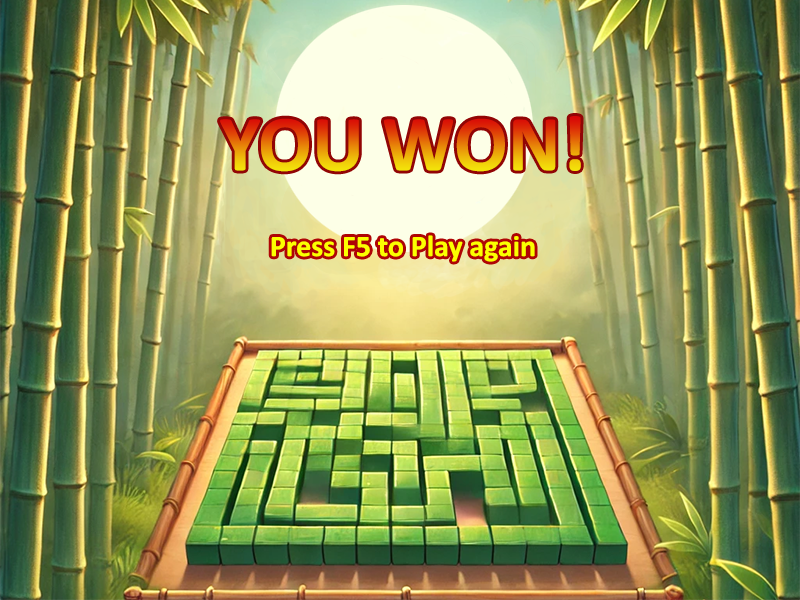
<style>
.page{position:relative;width:800px;height:600px}
.page>*{position:absolute;margin:0}
.t1{font:80px "Calibri-Bold"}
.t2{font:30px "Calibri-Bold";color:#fcff00}
</style>
<div class="page">
<p class="t1" style="left:220px;top:116px;width:361px;height:56px">YOU WON!</p>
<p class="t2" style="left:271px;top:235px;width:264px;height:27px">Press F5 to Play again</p>
</div>
